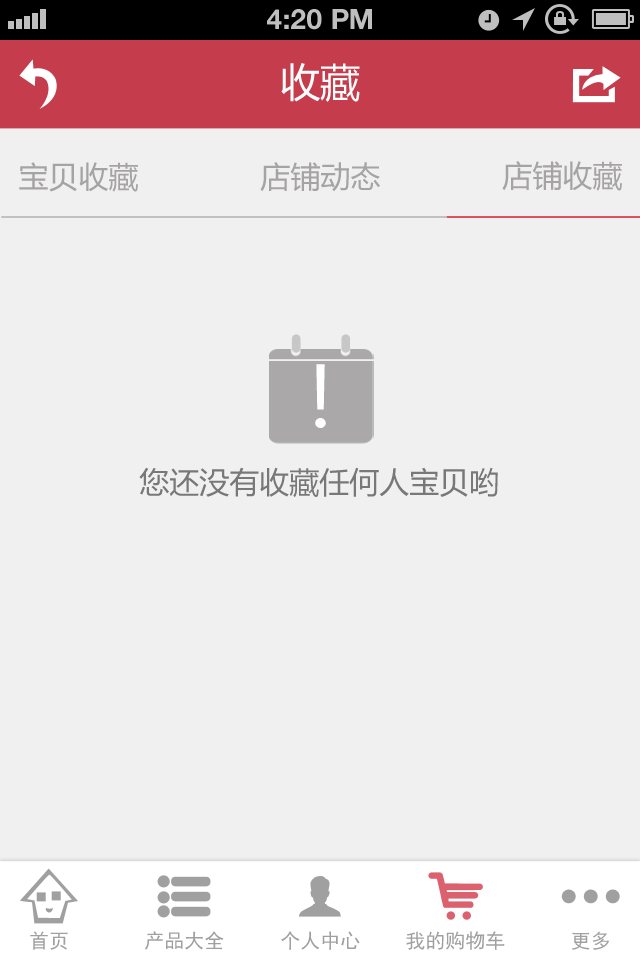
<style>
.page{position:relative;width:640px;height:960px;background:#f0f0f0}
.page>*{position:absolute;margin:0}
.t1{font:28px "HelveticaNeue-Bold";color:#bfbfbf;text-transform:uppercase}
.t2{font:40px "MicrosoftYaHei";color:#ffffff;text-transform:uppercase}
.t3{font:30px "MicrosoftYaHei";color:#a5a3a3;text-transform:uppercase}
.t4{font:83px "MicrosoftYaHei";color:#ffffff;text-transform:uppercase}
.t5{font:30px "MicrosoftYaHei";color:#787878;text-transform:uppercase}
.t6{font:20px "SimHei";color:#a0a0a0}
</style>
<div class="page">
<p class="t1" style="left:267px;top:9px;width:105px;height:21px">4:20 PM</p>
<p class="t2" style="left:281px;top:63px;width:79px;height:39px">收藏</p>
<p class="t3" style="left:502px;top:161px;width:120px;height:30px">店铺收藏</p>
<p class="t3" style="left:19px;top:162px;width:119px;height:30px">宝贝收藏</p>
<p class="t3" style="left:260px;top:162px;width:120px;height:30px">店铺动态</p>
<p class="t4" style="left:315px;top:364px;width:11px;height:64px">!</p>
<p class="t5" style="left:139px;top:467px;width:359px;height:31px">您还没有收藏任何人宝贝哟</p>
<p class="t6" style="left:30px;top:931px;width:38px;height:19px">首页</p>
<p class="t6" style="left:145px;top:931px;width:79px;height:19px">产品大全</p>
<p class="t6" style="left:281px;top:931px;width:79px;height:19px">个人中心</p>
<p class="t6" style="left:406px;top:931px;width:99px;height:19px">我的购物车</p>
<p class="t6" style="left:572px;top:931px;width:38px;height:19px">更多</p>
</div>
